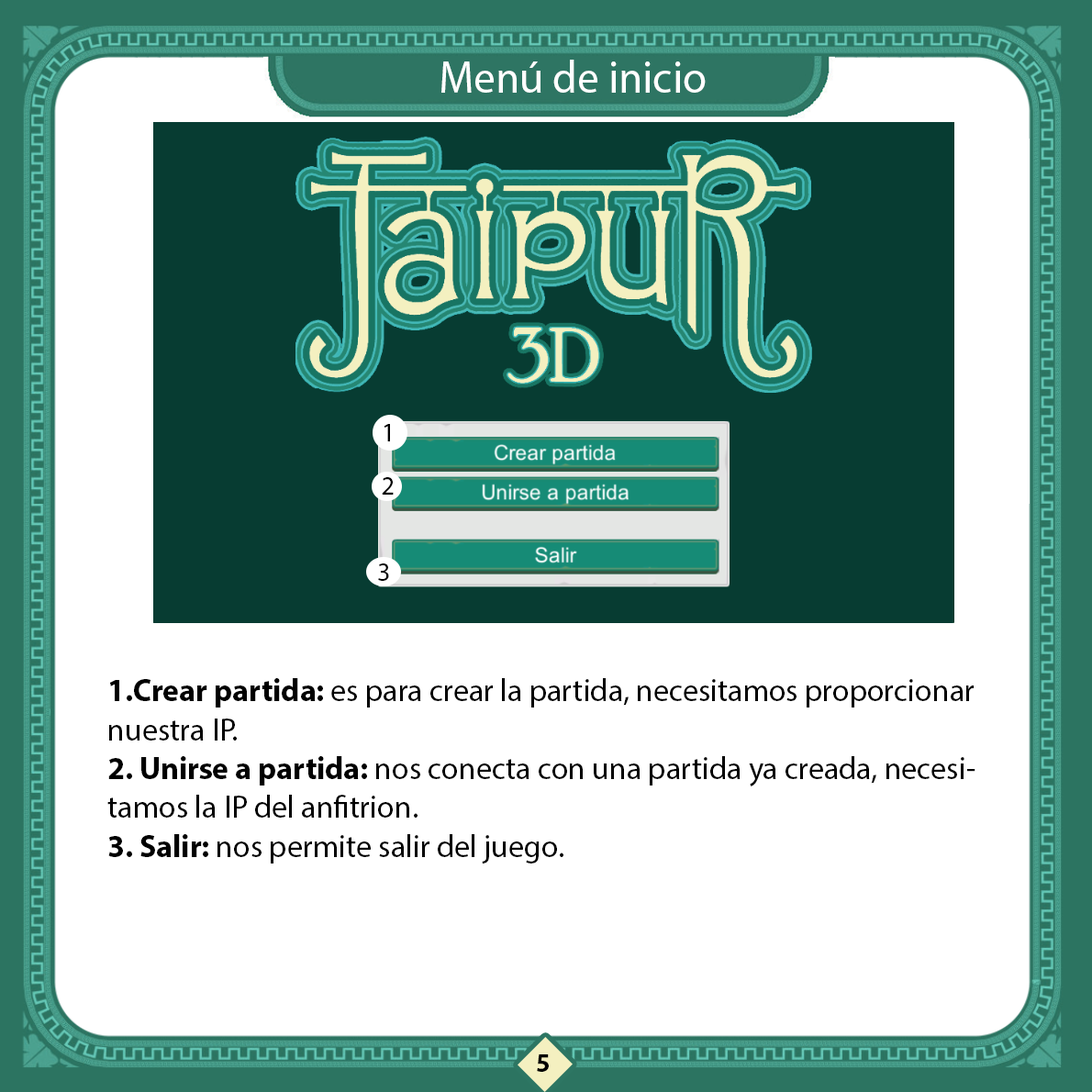
<style>
.page{position:relative;width:1092px;height:1092px;background:#ffffff}
.page>*{position:absolute;margin:0}
.t1{font:45.3px "MyriadPro-Regular";color:#ffffff;scale:0.96 1}
.t2{font:26.8px "MyriadPro-Regular";color:#000000;scale:0.96 1}
.t3{font:32.4px "MyriadPro-Regular";color:#000000;scale:0.96 1}
.t4{font:32.4px "MyriadPro-Bold";color:#000000;scale:0.96 1}
.t5{font:25.9px "MyriadHebrew-Bold";color:#000000}
</style>
<div class="page">
<p class="t1" style="left:441px;top:60px;width:265px;height:33px">Menú de inicio</p>
<p class="t2" style="left:384px;top:424px;width:6px;height:17px">1</p>
<p class="t2" style="left:382px;top:477px;width:12px;height:18px">2</p>
<p class="t2" style="left:378px;top:563px;width:11px;height:18px">3</p>
<p class="t3" style="left:107px;top:678px;width:868px;height:185px;text-align:right"><span class="t4">1.Crear partida:</span> es para crear la partida, necesitamos proporcionar nuestra IP.<br><span class="t4">2. Unirse a partida:</span> nos conecta con una partida ya creada, necesitamos la IP del anfitrion.<br><span class="t4">3. Salir:</span> nos permite salir del juego.</p>
<p class="t5" style="left:537px;top:1054px;width:12px;height:18px">5</p>
</div>
